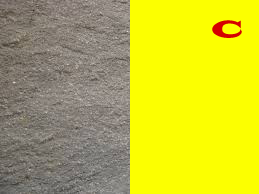
<style>
.page{position:relative;width:259px;height:194px;background:#fcff00}
.page>*{position:absolute;margin:0}
.t1{font:24px "LatinWide";color:#d40000}
</style>
<div class="page">
<p class="t1" style="left:212px;top:20px;width:30px;height:18px">C</p>
</div>
